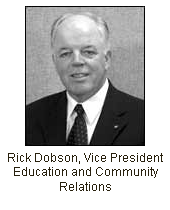
<style>
.page{position:relative;width:170px;height:210px;background:#ffffff}
.page>*{position:absolute;margin:0}
.t1{font:12px "ArialMT";color:#28200d}
</style>
<div class="page">
<p class="t1" style="left:8px;top:153px;width:155px;height:38px;text-align:center">Rick Dobson, Vice President<br>Education and Community<br>Relations</p>
</div>
